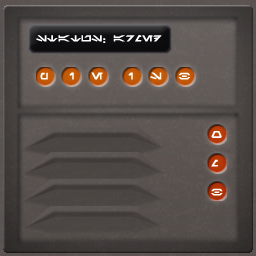
<style>
.page{position:relative;width:256px;height:256px}
.page>*{position:absolute;margin:0}
.t1{font:9.6px "Aurabesh";color:#ffffff;font-weight:bold;scale:1.11 1}
.t2{font:7.2px "Aurabesh";color:#ffffff;font-weight:bold;scale:1.11 1}
</style>
<div class="page">
<p class="t1" style="left:36px;top:35px;width:126px;height:8px">status:armed</p>
<p class="t2" style="left:40px;top:72px;width:150px;height:8px">P     I    E      I    S    B</p>
<p class="t2" style="left:211px;top:131px;width:12px;height:65px">O<br><br><br>M<br><br><br>B</p>
</div>
